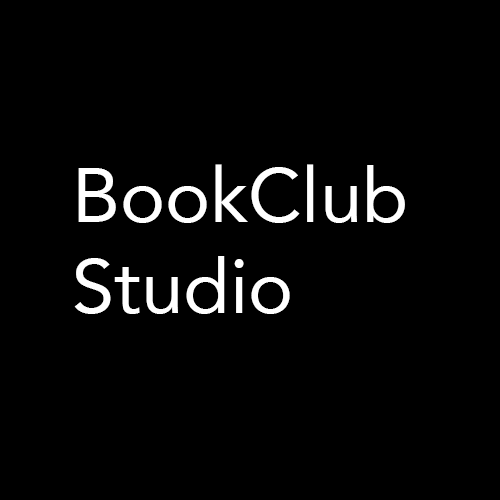
<style>
.page{position:relative;width:500px;height:500px;background:#000000}
.page>*{position:absolute;margin:0}
.t1{font:76px "Avenir-Roman";color:#ffffff}
</style>
<div class="page">
<p class="t1" style="left:74px;top:164px;width:331px;height:150px">BookClub<br>Studio</p>
</div>
